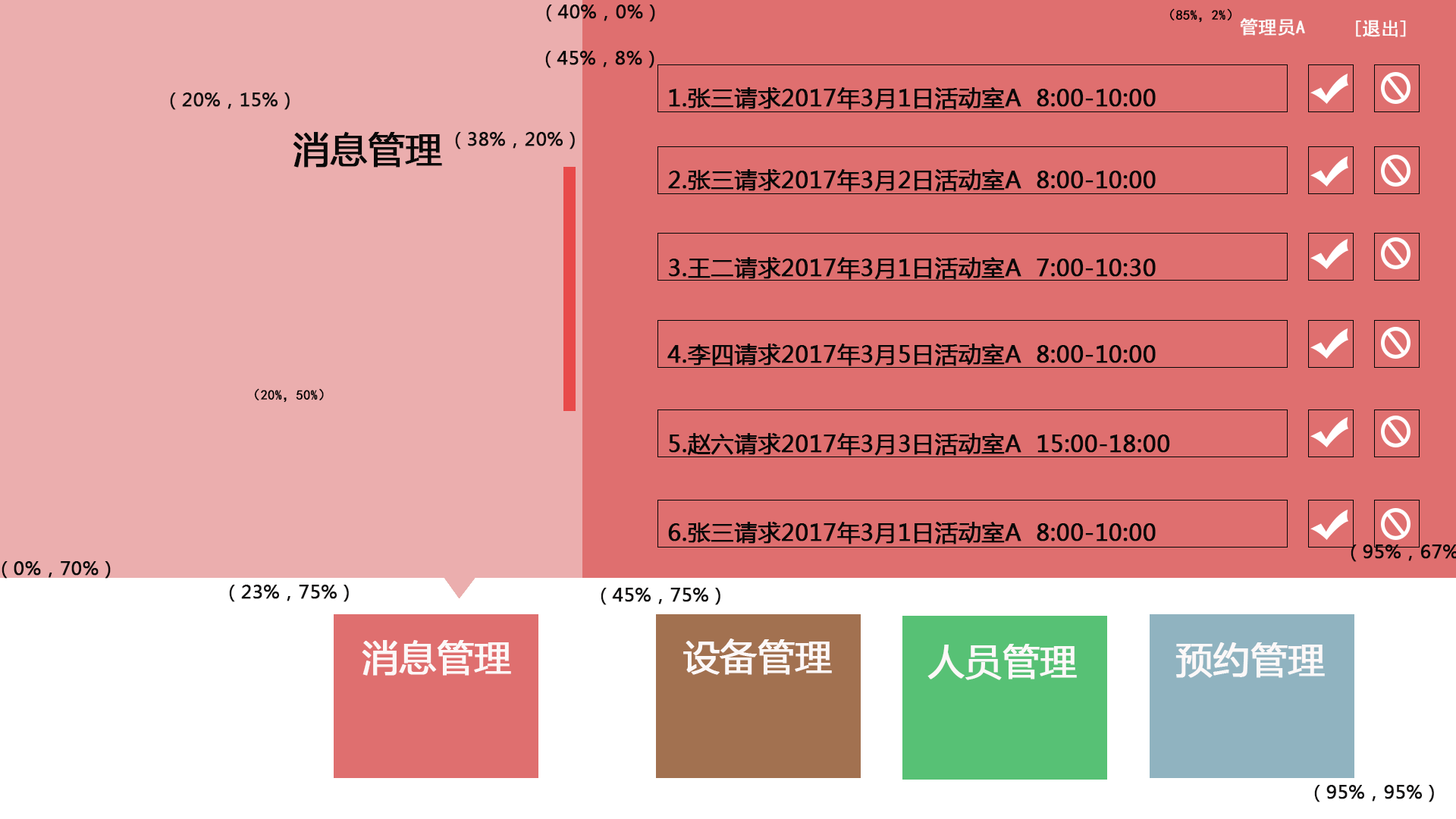
<style>
.page{position:relative;width:1456px;height:819px;background:#df6f6f}
.page>*{position:absolute;margin:0}
.t1{font:18.2px "MicrosoftYaHei";color:#0b0b0b;font-weight:bold}
.t2{font:13.6px "SimHei";color:#000000;font-weight:bold}
.t3{font:18.2px "SimHei";color:#fcfafa;font-weight:bold}
.t4{font:18.2px "MicrosoftYaHei";color:#080808;font-weight:bold}
.t5{font:22.7px "MicrosoftYaHei";color:#080808;font-weight:bold}
.t6{font:18.2px "MicrosoftYaHei";color:#121111;font-weight:bold}
.t7{font:36.4px "MicrosoftYaHei";color:#090909;font-weight:bold}
.t8{font:18.2px "MicrosoftYaHei";color:#0e0e0e;font-weight:bold}
.t9{font:36.4px "MicrosoftYaHei";color:#fcf8f8;font-weight:bold}
</style>
<div class="page">
<p class="t1" style="left:546px;top:5px;width:109px;height:17px">（40%，0%）</p>
<p class="t2" style="left:1169px;top:8px;width:63px;height:15px">（85%，2%）</p>
<p class="t3" style="left:1240px;top:18px;width:65px;height:18px">管理员A</p>
<p class="t3" style="left:1356px;top:20px;width:50px;height:17px">[退出]</p>
<p class="t4" style="left:545px;top:51px;width:109px;height:17px">（45%，8%）</p>
<p class="t5" style="left:669px;top:87px;width:487px;height:23px">1.张三请求2017年3月1日活动室A  8:00-10:00</p>
<p class="t6" style="left:170px;top:93px;width:120px;height:17px">（20%，15%）</p>
<p class="t7" style="left:293px;top:132px;width:149px;height:36px">消息管理</p>
<p class="t8" style="left:455px;top:132px;width:120px;height:17px">（38%，20%）</p>
<p class="t5" style="left:668px;top:169px;width:488px;height:23px">2.张三请求2017年3月2日活动室A  8:00-10:00</p>
<p class="t5" style="left:669px;top:257px;width:487px;height:23px">3.王二请求2017年3月1日活动室A  7:00-10:30</p>
<p class="t5" style="left:667px;top:344px;width:489px;height:22px">4.李四请求2017年3月5日活动室A  8:00-10:00</p>
<p class="t2" style="left:254px;top:388px;width:70px;height:15px">（20%，50%）</p>
<p class="t5" style="left:669px;top:433px;width:501px;height:23px">5.赵六请求2017年3月3日活动室A  15:00-18:00</p>
<p class="t5" style="left:668px;top:522px;width:488px;height:22px">6.张三请求2017年3月1日活动室A  8:00-10:00</p>
<p class="t1" style="left:2px;top:561px;width:109px;height:18px">（0%，70%）</p>
<p class="t6" style="left:229px;top:585px;width:120px;height:17px">（23%，75%）</p>
<p class="t6" style="left:601px;top:588px;width:119px;height:17px">（45%，75%）</p>
<p class="t9" style="left:362px;top:640px;width:149px;height:36px">消息管理</p>
<p class="t9" style="left:683px;top:639px;width:149px;height:36px">设备管理</p>
<p class="t9" style="left:927px;top:644px;width:150px;height:36px">人员管理</p>
<p class="t9" style="left:1175px;top:642px;width:150px;height:36px">预约管理</p>
<p class="t6" style="left:1314px;top:785px;width:120px;height:17px">（95%，95%）</p>
</div>
